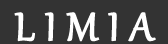
<style>
.page{position:relative;width:168px;height:44px;background:#333333}
.page>*{position:absolute;margin:0}
.t1{font:48px "Gabriola";letter-spacing:0.2em;color:#ffffff;font-weight:bold}
</style>
<div class="page">
<p class="t1" style="left:14px;top:12px;width:142px;height:30px">LIMIA</p>
</div>
